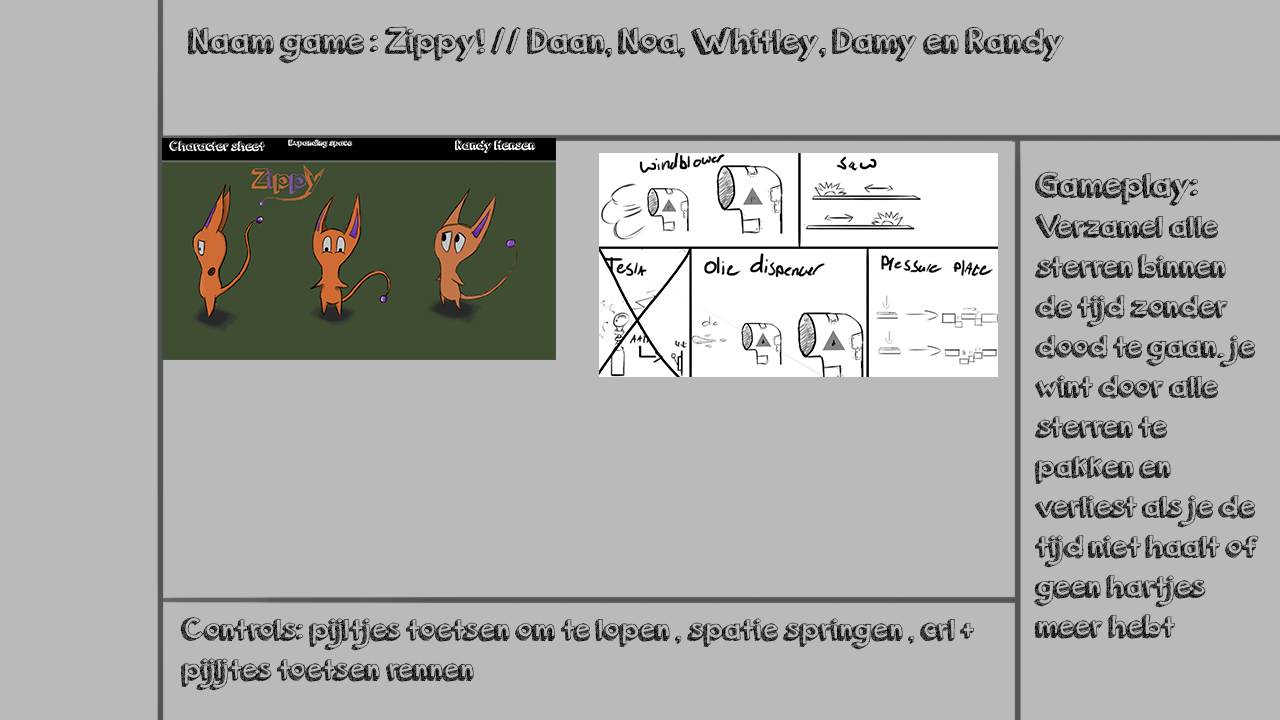
<style>
.page{position:relative;width:1280px;height:720px;background:#bababa}
.page>*{position:absolute;margin:0}
.t1{font:37.5px "orangejuice";color:#000000}
.t2{font:33.3px "orangejuice";color:#000000}
</style>
<div class="page">
<p class="t1" style="left:187px;top:26px;width:877px;height:38px">Naam game : Zippy! // Daan, Noa, Whitley, Damy en Randy</p>
<p class="t2" style="left:1034px;top:171px;width:225px;height:468px"><span class="t1">Gameplay:<br></span>Verzamel alle sterren binnen de tijd zonder dood te gaan. je wint door alle sterren te pakken en verliest als je de tijd niet haalt of geen hartjes meer hebt</p>
<p class="t2" style="left:180px;top:617px;width:794px;height:74px">Controls: pijltjes toetsen om te lopen , spatie springen , crl + pijljtes toetsen rennen</p>
</div>
